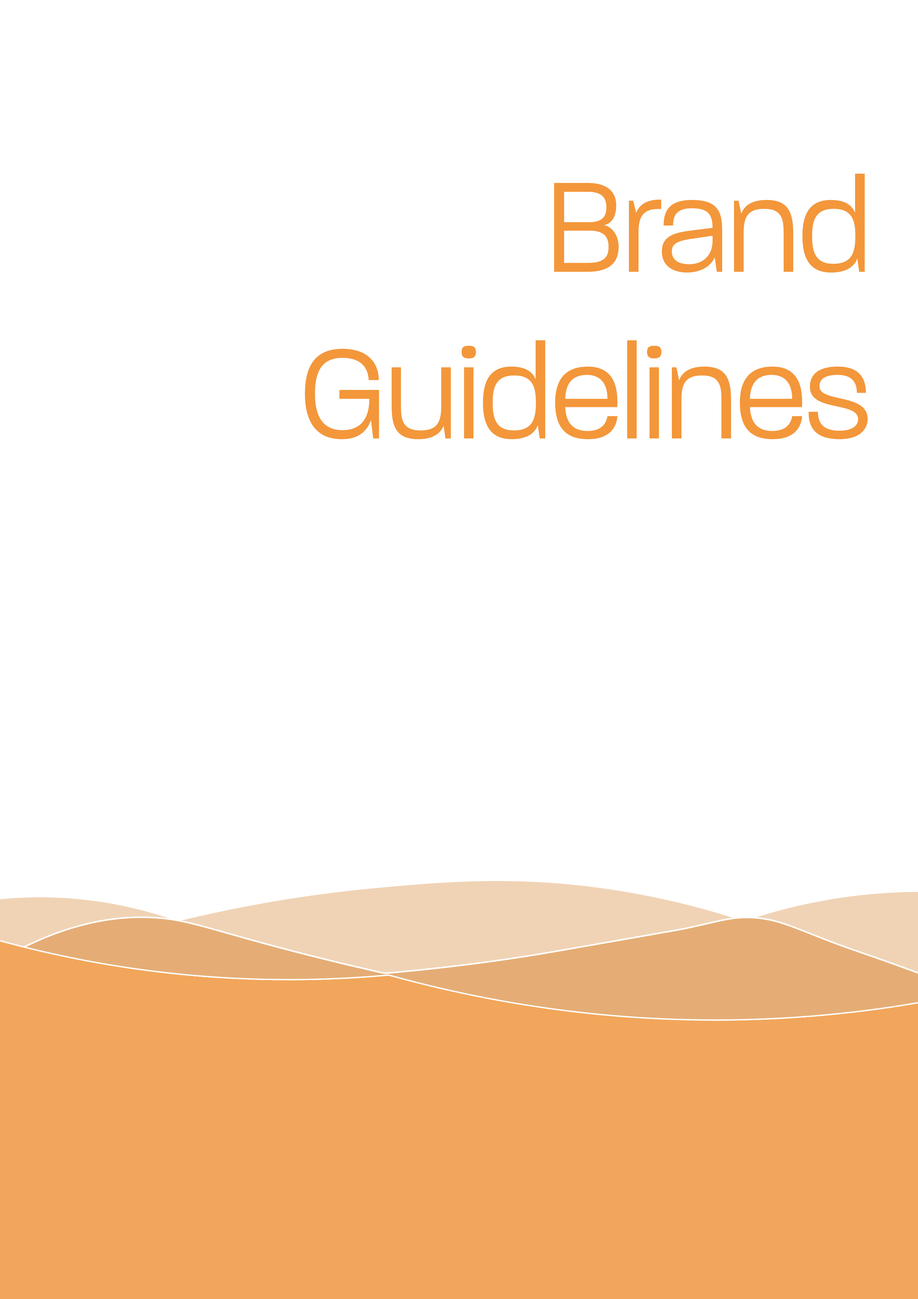
<style>
.page{position:relative;width:918px;height:1299px;background:#ffffff}
.page>*{position:absolute;margin:0}
.t1{font:138.8px "Paralucent-Light";color:#f3973a;scale:0.92 1}
</style>
<div class="page">
<p class="t1" style="left:305px;top:174px;width:563px;height:265px;text-align:right">Brand Guidelines</p>
</div>
